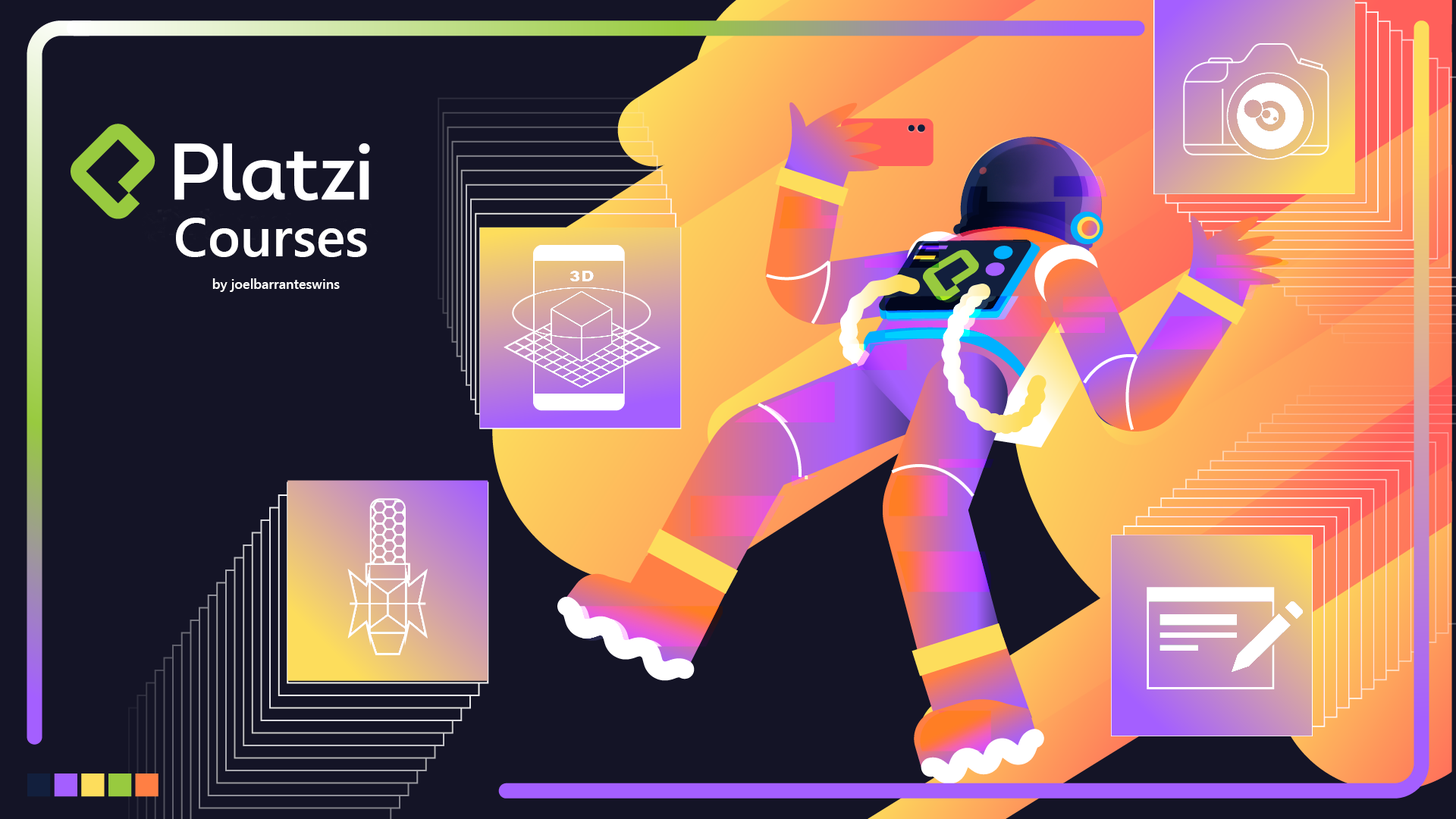
<style>
.page{position:relative;width:1456px;height:819px;background:#141426}
.page>*{position:absolute;margin:0}
.t1{font:13.6px "SegoeUI-Semibold";color:#ffffff}
.t2{font:54.6px "SegoeUI-Semibold";color:#ffffff}
</style>
<div class="page">
<p class="t1" style="left:176px;top:218px;width:191px;height:74px"><span class="t2">Courses<br></span>  <br>    by joelbarranteswins</p>
</div>
